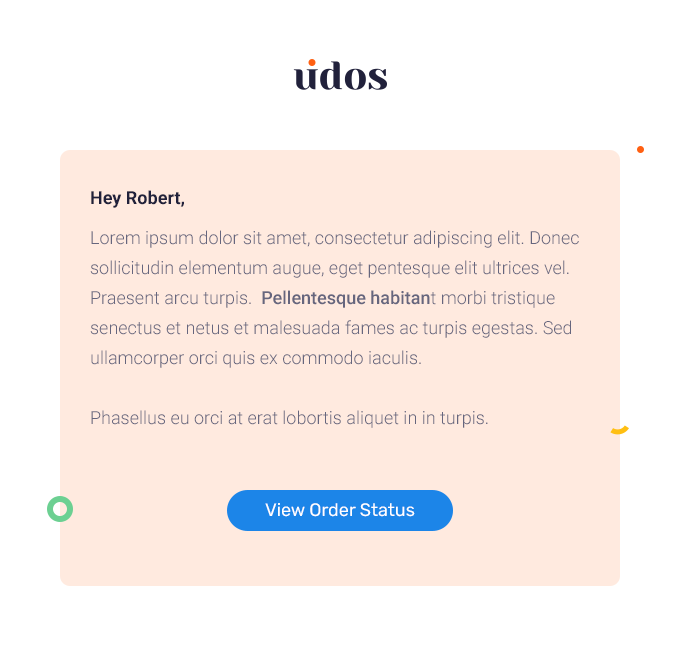
<style>
.page{position:relative;width:680px;height:660px;background:#ffeadf}
.page>*{position:absolute;margin:0}
.t1{font:18px/30px "Roboto-Light";color:#66667e}
.t2{font:18px/30px "Roboto-Bold";color:#21213b}
.t3{font:18px/40px "Roboto-Light";color:#66667e}
.t4{font:18px/30px "Roboto-Medium";color:#66667e}
.t5{font:18px "Rubik-Regular";color:#ffffff}
</style>
<div class="page">
<p class="t1" style="left:90px;top:190px;width:489px;height:238px"><span class="t2">Hey Robert,<br></span><span class="t3">Lorem ipsum dolor sit amet, consectetur adipiscing elit. Donec </span>sollicitudin elementum augue, eget pentesque elit ultrices vel. Praesent arcu turpis.  <span class="t4">Pellentesque habitan</span>t morbi tristique senectus et netus et malesuada fames ac turpis egestas. Sed ullamcorper orci quis ex commodo iaculis. <br><br>Phasellus eu orci at erat lobortis aliquet in in turpis.</p>
<p class="t5" style="left:265px;top:503px;width:150px;height:14px">View Order Status</p>
</div>
